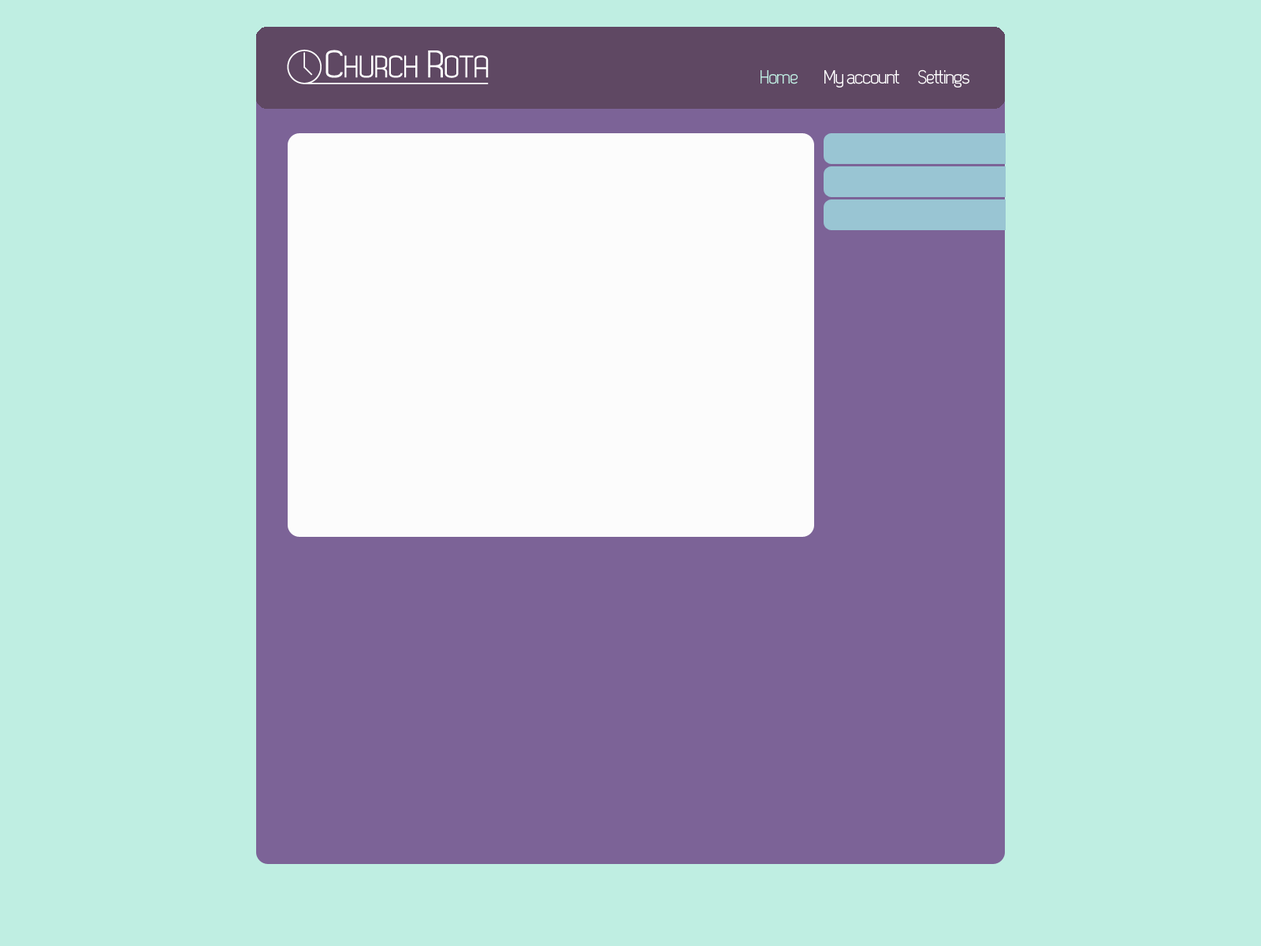
<style>
.page{position:relative;width:1261px;height:946px;background:#bfeee2}
.page>*{position:absolute;margin:0}
.t1{font:18.9px "Dekar";letter-spacing:-0.05em;color:#bfeee2}
.t2{font:18.9px "Dekar";letter-spacing:-0.05em;color:#ffffff}
</style>
<div class="page">
<p class="t1" style="left:760px;top:70px;width:38px;height:14px">Home</p>
<p class="t2" style="left:824px;top:70px;width:75px;height:17px">My account</p>
<p class="t2" style="left:918px;top:69px;width:51px;height:18px">Settings</p>
</div>
